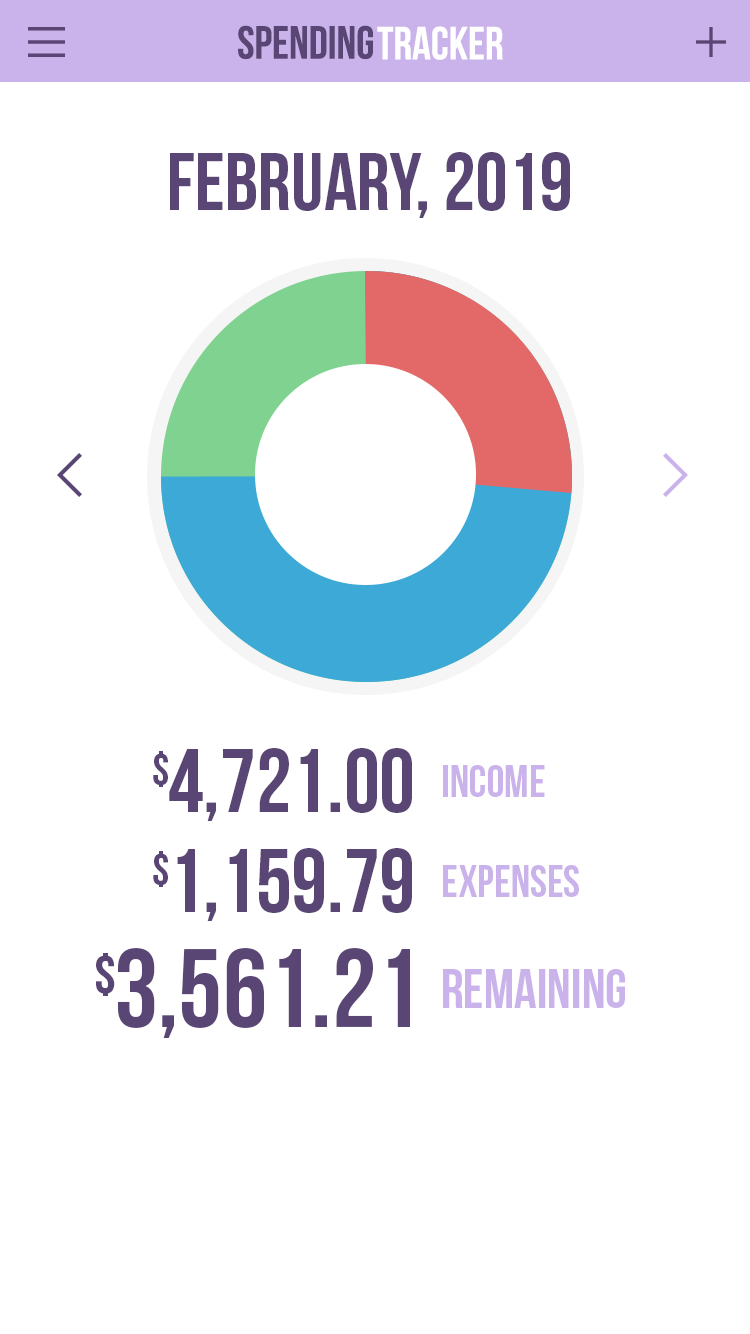
<style>
.page{position:relative;width:750px;height:1334px;background:#ffffff}
.page>*{position:absolute;margin:0}
.t1{font:46.3px "BebasNeue";color:#594674}
.t2{font:46.3px "BebasNeue";color:#ffffff}
.t3{font:81.7px "BebasNeue";color:#594674}
.t4{font:90px "BebasNeue";color:#594674}
.t5{font:45px "BebasNeue";color:#594674}
.t6{font:45px "BebasNeue";color:#cab3ea}
.t7{font:55.5px "BebasNeue";color:#594674}
.t8{font:111.1px "BebasNeue";color:#594674}
.t9{font:55.5px "BebasNeue";color:#cab3ea}
</style>
<div class="page">
<p class="t1" style="left:238px;top:25px;width:135px;height:35px">Spending</p>
<p class="t2" style="left:377px;top:26px;width:126px;height:34px">Tracker</p>
<p class="t3" style="left:170px;top:152px;width:400px;height:66px">February, 2019</p>
<p class="t4" style="left:169px;top:748px;width:243px;height:73px">4,721.00</p>
<p class="t5" style="left:153px;top:751px;width:15px;height:36px">$</p>
<p class="t6" style="left:443px;top:765px;width:102px;height:32px">Income</p>
<p class="t5" style="left:153px;top:851px;width:15px;height:36px">$</p>
<p class="t4" style="left:177px;top:848px;width:235px;height:73px">1,159.79</p>
<p class="t6" style="left:443px;top:865px;width:136px;height:32px">Expenses</p>
<p class="t7" style="left:96px;top:953px;width:19px;height:43px">$</p>
<p class="t8" style="left:118px;top:948px;width:292px;height:90px">3,561.21</p>
<p class="t9" style="left:443px;top:969px;width:182px;height:39px">Remaining</p>
</div>
